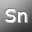
<style>
.page{position:relative;width:32px;height:32px}
.page>*{position:absolute;margin:0}
.t1{font:18px "Tahoma";color:#ffffff;scale:1.11 1}
</style>
<div class="page">
<p class="t1" style="left:5px;top:9px;width:22px;height:13px">Sn</p>
</div>
